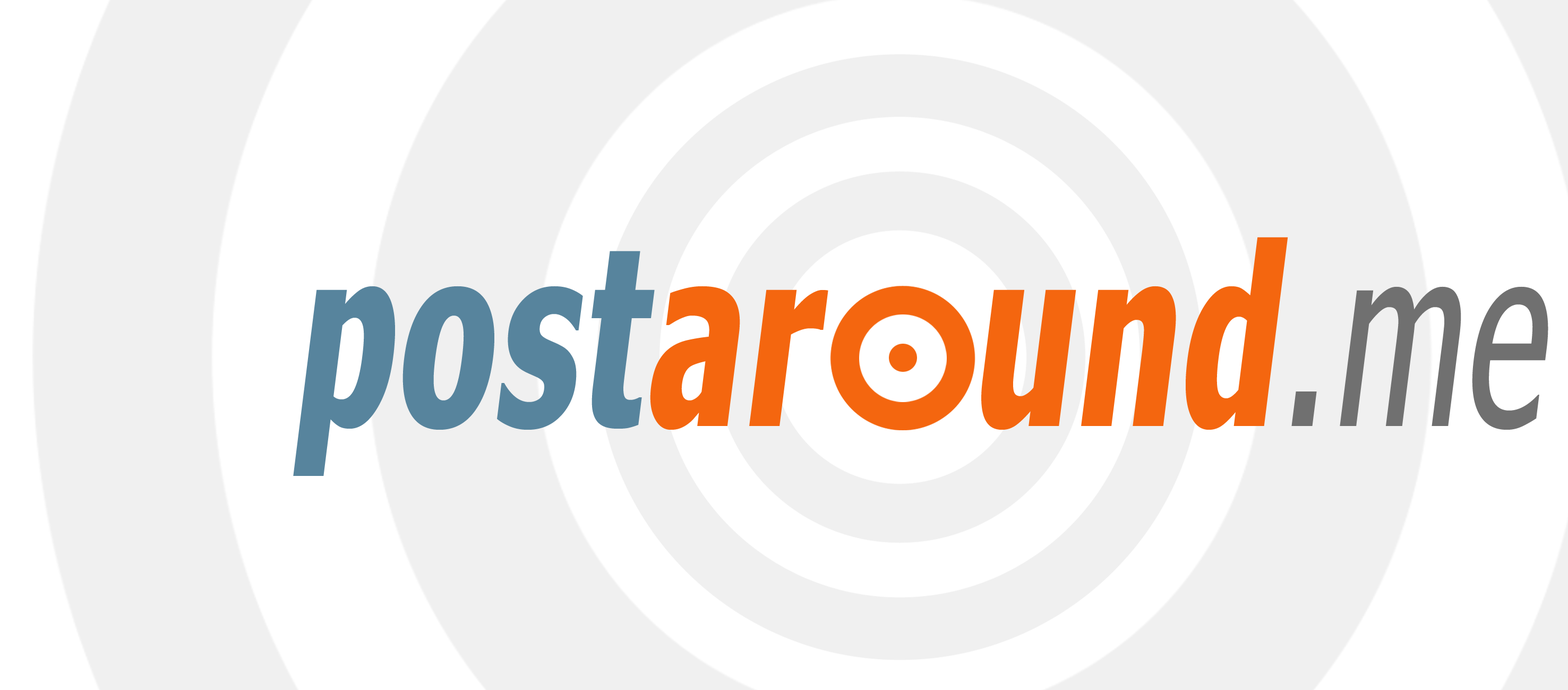
<style>
.page{position:relative;width:1568px;height:690px;background:#f0f0f0}
.page>*{position:absolute;margin:0}
.t1{font:247.8px "Nina-Bold";letter-spacing:0.03em;color:#f4660f;font-style:italic;scale:0.71 1}
.t2{font:247.8px "Nina-Bold";letter-spacing:0.03em;color:#57849d;font-style:italic;scale:0.71 1}
.t3{font:247.8px "Nina";letter-spacing:0.03em;color:#707070;font-style:italic;scale:0.71 1}
</style>
<div class="page">
<p class="t1" style="left:293px;top:237px;width:1255px;height:239px"><span class="t2">post</span>ar   und<span class="t3">.me</span></p>
</div>
